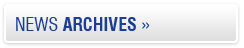
<style>
.page{position:relative;width:244px;height:48px}
.page>*{position:absolute;margin:0}
.t1{font:18px "Swiss721BT-BoldCondensed";color:#1c3f95;text-transform:uppercase}
.t2{font:18px "Swiss721BT-RomanCondensed";color:#1c3f95;text-transform:uppercase}
</style>
<div class="page">
<p class="t1" style="left:16px;top:17px;width:134px;height:14px"><span class="t2">News </span>Archives <span class="t2">»</span></p>
</div>
